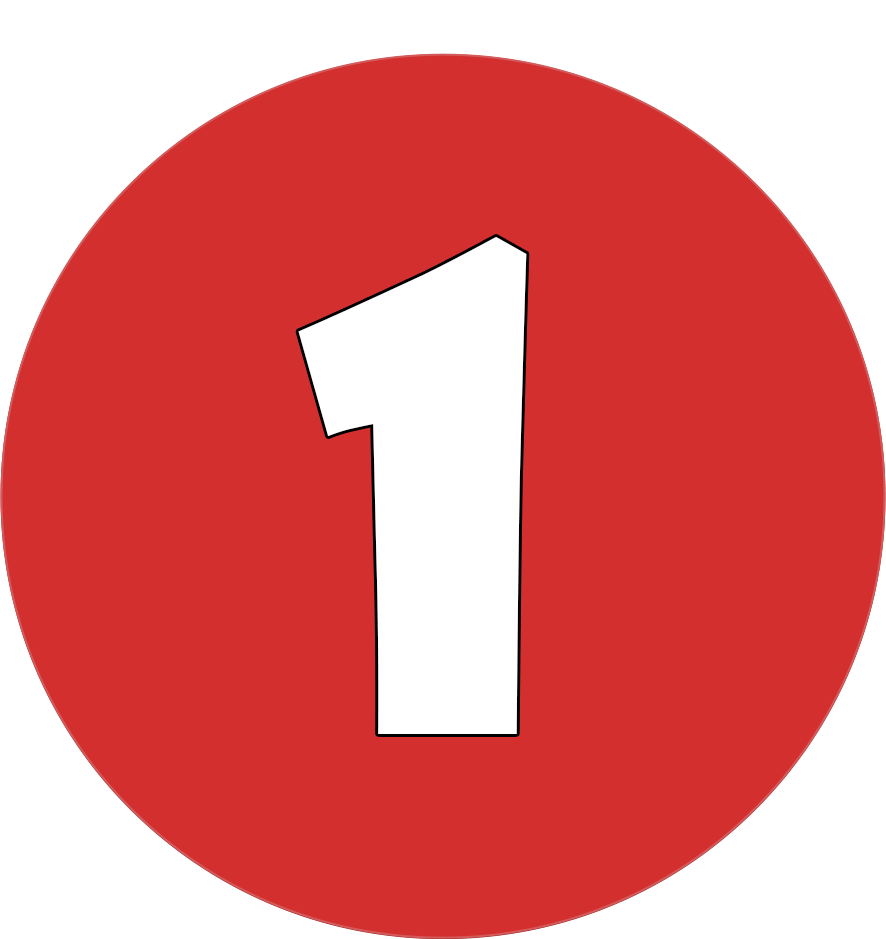
<style>
.page{position:relative;width:886px;height:939px;background:#d32f2f}
.page>*{position:absolute;margin:0}
.t1{font:637.2px "ShowcardGothic-Reg";color:#ffffff}
</style>
<div class="page">
<p class="t1" style="left:298px;top:237px;width:229px;height:497px">1</p>
</div>
